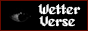
<style>
.page{position:relative;width:88px;height:31px;background:#000000}
.page>*{position:absolute;margin:0}
.t1{font:14px "Alagard";color:#ffffff}
</style>
<div class="page">
<p class="t1" style="left:38px;top:4px;width:43px;height:11px">Wetter</p>
<p class="t1" style="left:39px;top:16px;width:36px;height:11px">Verse</p>
</div>
